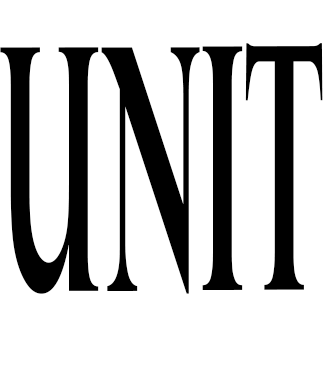
<style>
.page{position:relative;width:324px;height:366px;background:#ffffff}
.page>*{position:absolute;margin:0}
.t1{font:338.5px "PerpetuaTitlingMT-Bold";color:#000000;scale:0.35 1}
</style>
<div class="page">
<p class="t1" style="left:0px;top:43px;width:323px;height:251px">UNIT</p>
</div>
